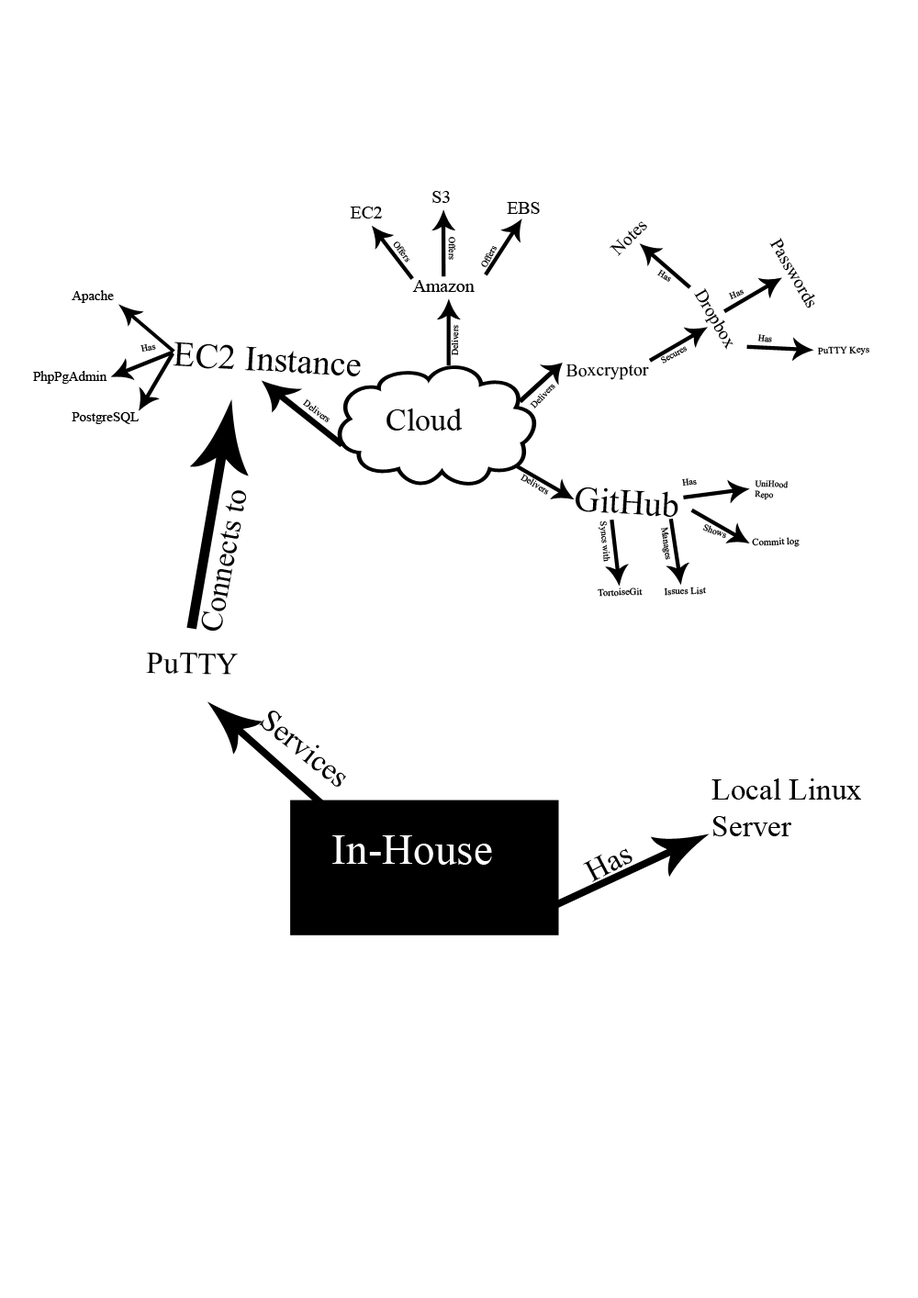
<style>
.page{position:relative;width:918px;height:1298px;background:#ffffff}
.page>*{position:absolute;margin:0}
.t1{font:18.1px "TimesNewRomanPSMT";color:#000000}
.t2{font:9.1px "TimesNewRomanPSMT";color:#000000}
.t3{font:9.1px "TimesNewRomanPSMT"}
.t4{font:13.7px "TimesNewRomanPSMT";color:#000000}
.t5{font:35.1px "TimesNewRomanPSMT";color:#000000}
.t6{font:9.8px "TimesNewRomanPSMT";color:#000000}
.t7{font:31.2px "TimesNewRomanPSMT";color:#000000}
.t8{font:8.8px "TimesNewRomanPSMT";color:#000000}
.t9{font:30.6px "TimesNewRomanPSMT";color:#000000}
.t10{font:43.3px "TimesNewRomanPSMT";color:#ffffff}
</style>
<div class="page">
<p class="t1" style="left:433px;top:191px;width:17px;height:12px">S3</p>
<p class="t1" style="left:350px;top:207px;width:32px;height:12px">EC2</p>
<p class="t1" style="left:507px;top:202px;width:33px;height:12px">EBS</p>
<p class="t1" style="left:609px;top:221px;width:38px;height:35px;rotate:-45deg">Notes</p>
<p class="t2" style="left:393px;top:242px;width:17px;height:21px;rotate:53deg">Offers</p>
<p class="t2" style="left:448px;top:237px;width:7px;height:23px;rotate:90deg">Offers</p>
<p class="t1" style="left:770px;top:237px;width:45px;height:72px;rotate:60deg">Passwords</p>
<p class="t2" style="left:481px;top:246px;width:16px;height:21px;rotate:-61deg">Offers</p>
<p class="t3" style="left:658px;top:269px;width:13px;height:13px;rotate:32deg">Has</p>
<p class="t1" style="left:412px;top:280px;width:63px;height:12px">Amazon</p>
<p class="t4" style="left:72px;top:290px;width:42px;height:13px">Apache</p>
<p class="t1" style="left:694px;top:287px;width:40px;height:63px;rotate:60deg">Dropbox</p>
<p class="t2" style="left:728px;top:289px;width:16px;height:11px;rotate:-23deg">Has</p>
<p class="t2" style="left:451px;top:325px;width:8px;height:30px;rotate:-90deg">Delivers</p>
<p class="t5" style="left:173px;top:342px;width:188px;height:35px;rotate:3deg">EC2 Instance</p>
<p class="t2" style="left:758px;top:334px;width:14px;height:9px;rotate:7deg">Has</p>
<p class="t2" style="left:141px;top:344px;width:15px;height:8px;rotate:-12deg">Has</p>
<p class="t2" style="left:661px;top:346px;width:27px;height:18px;rotate:-30deg">Secures</p>
<p class="t6" style="left:818px;top:346px;width:52px;height:9px;rotate:-2deg">PuTTY Keys</p>
<p class="t1" style="left:566px;top:364px;width:83px;height:16px">Boxcryptor</p>
<p class="t4" style="left:33px;top:371px;width:74px;height:13px">PhpPgAdmin</p>
<p class="t2" style="left:530px;top:384px;width:26px;height:25px;rotate:-47deg">Delivers</p>
<p class="t2" style="left:303px;top:399px;width:27px;height:23px;rotate:37deg">Delivers</p>
<p class="t4" style="left:72px;top:412px;width:67px;height:12px">PostgreSQL</p>
<p class="t7" style="left:387px;top:409px;width:76px;height:22px">Cloud</p>
<p class="t2" style="left:521px;top:474px;width:28px;height:21px;rotate:30deg">Delivers</p>
<p class="t3" style="left:682px;top:478px;width:15px;height:9px;rotate:-8deg">Has</p>
<p class="t8" style="left:755px;top:480px;width:33px;height:20px;rotate:1deg">UniHood Repo</p>
<p class="t9" style="left:201px;top:490px;width:45px;height:141px;rotate:-79deg">Connects to</p>
<p class="t5" style="left:576px;top:488px;width:103px;height:29px;rotate:3deg">GitHub</p>
<p class="t2" style="left:599px;top:522px;width:12px;height:40px;rotate:84deg">Syncs with</p>
<p class="t3" style="left:661px;top:527px;width:9px;height:33px;rotate:82deg">Manages</p>
<p class="t2" style="left:703px;top:524px;width:23px;height:15px;rotate:20deg">Shows</p>
<p class="t6" style="left:752px;top:537px;width:48px;height:10px;rotate:-2deg">Commit log</p>
<p class="t6" style="left:598px;top:588px;width:45px;height:9px;rotate:-2deg">TortoiseGit</p>
<p class="t6" style="left:664px;top:587px;width:42px;height:9px;rotate:-2deg">Issues List</p>
<p class="t9" style="left:146px;top:653px;width:92px;height:22px;rotate:1deg">PuTTY</p>
<p class="t9" style="left:259px;top:711px;width:87px;height:76px;rotate:39deg">Services</p>
<p class="t9" style="left:712px;top:779px;width:149px;height:58px">Local Linux<br>Server</p>
<p class="t10" style="left:332px;top:836px;width:160px;height:29px">In-House</p>
<p class="t9" style="left:583px;top:849px;width:50px;height:34px;rotate:-28deg">Has</p>
</div>
